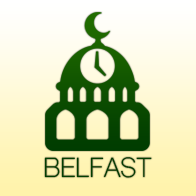
<style>
.page{position:relative;width:196px;height:196px}
.page>*{position:absolute;margin:0}
.t1{font:26.2px "ShreeDev0714";color:#013e00}
</style>
<div class="page">
<p class="t1" style="left:44px;top:157px;width:108px;height:21px">BELFAST</p>
</div>
